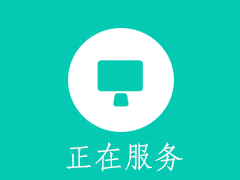
<style>
.page{position:relative;width:240px;height:180px;background:#04c9b3}
.page>*{position:absolute;margin:0}
.t1{font:30px "STFangsong";color:#fdfcfc}
</style>
<div class="page">
<p class="t1" style="left:66px;top:142px;width:117px;height:30px">正在服务</p>
</div>
